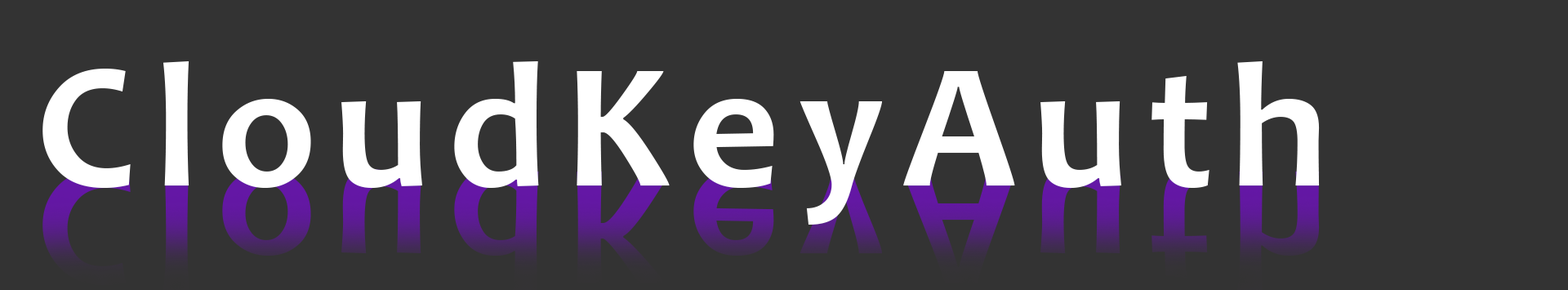
<style>
.page{position:relative;width:1568px;height:290px;background:#333333}
.page>*{position:absolute;margin:0}
.t1{font:179.7px "Candara-Bold";letter-spacing:-0.06em;color:#ffffff}
</style>
<div class="page">
<p class="t1" style="left:42px;top:61px;width:1278px;height:164px">C l o u d K e y A u t h</p>
</div>
